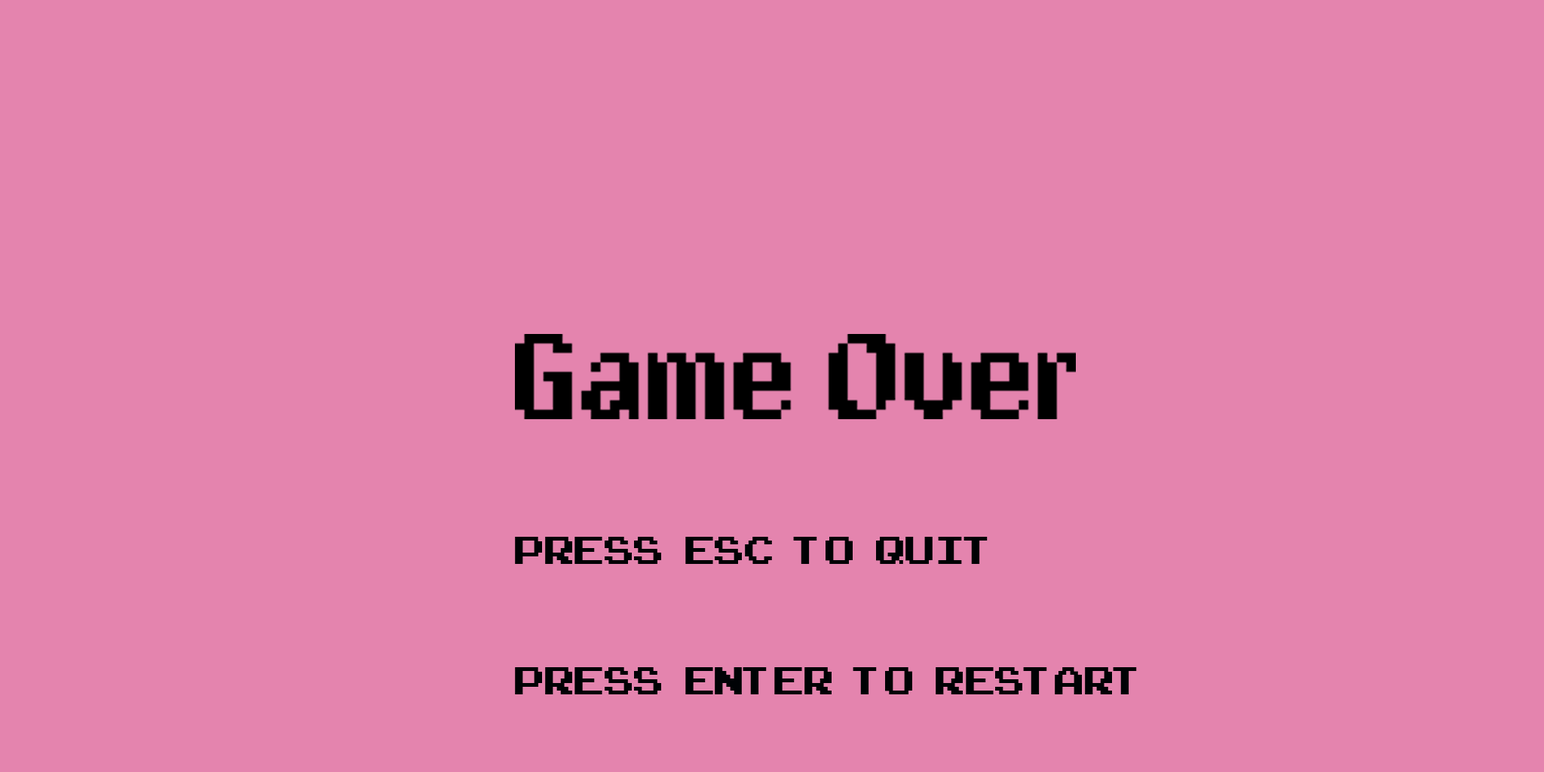
<style>
.page{position:relative;width:1544px;height:772px;background:#e484ae}
.page>*{position:absolute;margin:0}
.t1{font:54.3px "ArcadeClassic";color:#000205}
</style>
<div class="page">
<p class="t1" style="left:515px;top:537px;width:622px;height:157px">Press   ESC   TO   QUIT<br><br>PRESS   ENTER   TO   RESTART</p>
</div>
